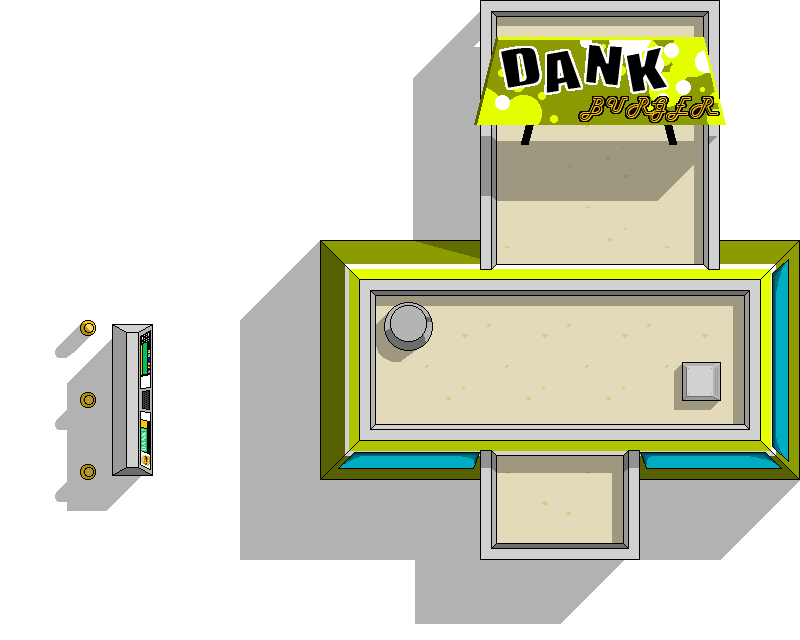
<style>
.page{position:relative;width:800px;height:640px;background:#ffffff}
.page>*{position:absolute;margin:0}
.t1{font:48px "Happy-HappyJoyJoy";letter-spacing:0.1em;color:#000000}
.t2{font:24px "Harlow";letter-spacing:0.1em;color:#ffc600}
</style>
<div class="page">
<p class="t1" style="left:501px;top:45px;width:166px;height:48px">DANK</p>
<p class="t2" style="left:579px;top:97px;width:140px;height:25px">BURGER</p>
</div>
